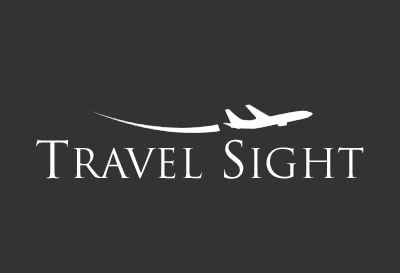
<style>
.page{position:relative;width:400px;height:273px;background:#333333}
.page>*{position:absolute;margin:0}
.t1{font:40px "TrajanPro-Regular";color:#fefefe}
.t2{font:50px "TrajanPro-Regular";color:#fefefe}
</style>
<div class="page">
<p class="t1" style="left:36px;top:139px;width:328px;height:40px"><span class="t2">T</span>RAVEL<span class="t2"> S</span>IGHT</p>
</div>
